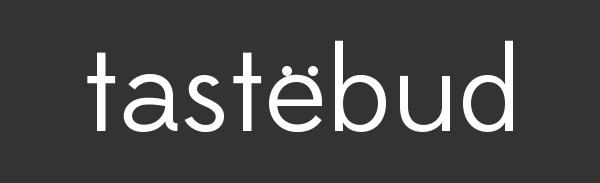
<style>
.page{position:relative;width:600px;height:183px;background:#333333}
.page>*{position:absolute;margin:0}
.t1{font:120.5px "Edmondsans-Regular";letter-spacing:0.02em;color:#ffffff}
</style>
<div class="page">
<p class="t1" style="left:87px;top:40px;width:426px;height:92px">tastebud</p>
</div>
